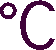
<style>
.page{position:relative;width:56px;height:50px;background:#ffffff}
.page>*{position:absolute;margin:0}
.t1{font:66.7px "Tuffy";color:#40033a}
</style>
<div class="page">
<p class="t1" style="left:0px;top:0px;width:55px;height:50px">°C</p>
</div>
